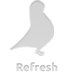
<style>
.page{position:relative;width:70px;height:73px;background:#ffffff}
.page>*{position:absolute;margin:0}
.t1{font:11.3px "Ubuntu-Bold";color:#cecece}
</style>
<div class="page">
<p class="t1" style="left:16px;top:62px;width:42px;height:10px">Refresh</p>
</div>
